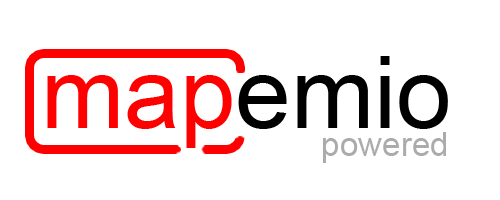
<style>
.page{position:relative;width:500px;height:200px;background:#ffffff}
.page>*{position:absolute;margin:0}
.t1{font:100px "ArialMT";color:#000000}
.t2{font:33.3px "ArialMT";color:#acacac}
</style>
<div class="page">
<p class="t1" style="left:238px;top:56px;width:210px;height:73px">emio</p>
<p class="t2" style="left:323px;top:132px;width:123px;height:31px">powered</p>
</div>
